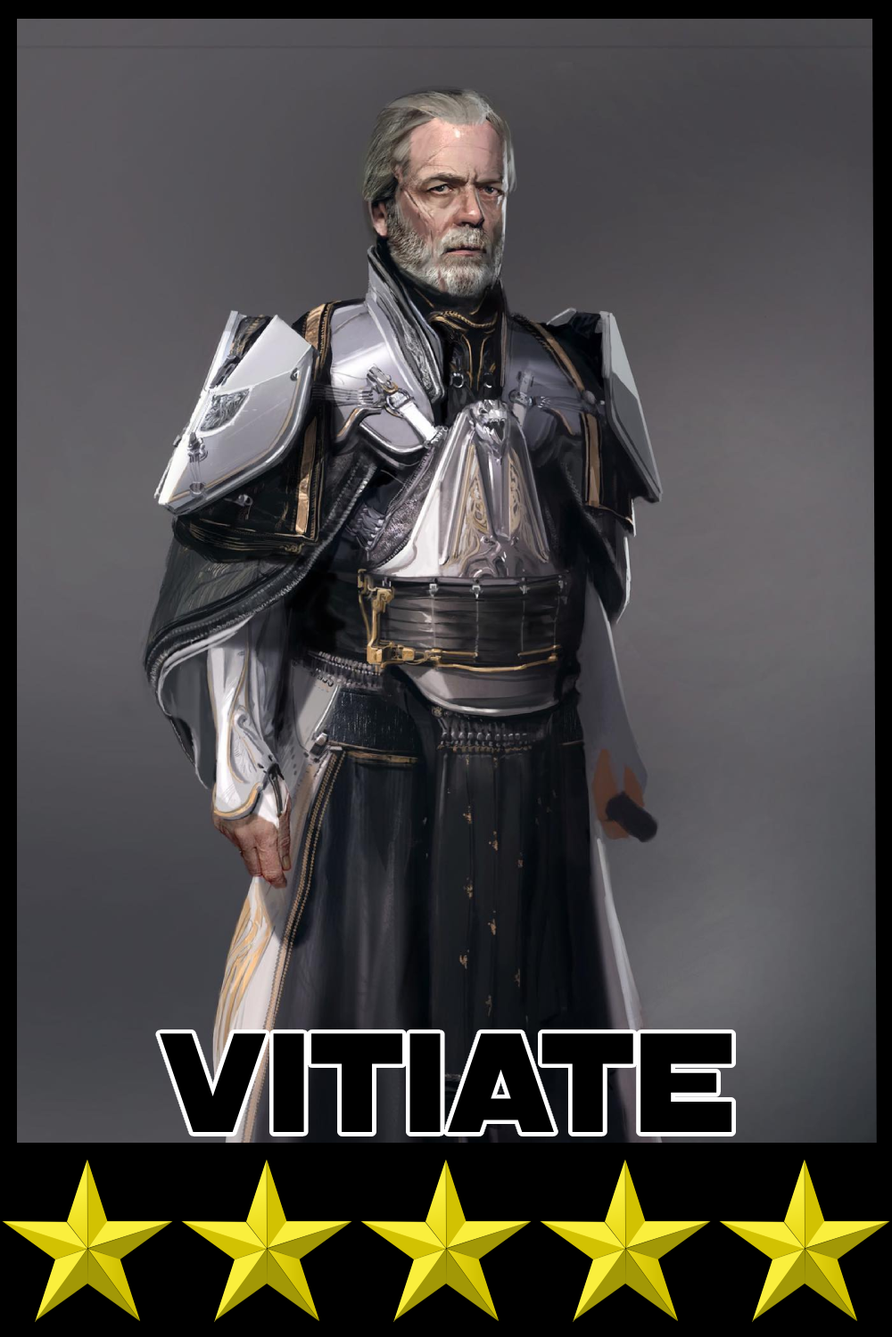
<style>
.page{position:relative;width:892px;height:1337px}
.page>*{position:absolute;margin:0}
.t1{font:151.5px "DistantGalaxy";color:#000000}
</style>
<div class="page">
<p class="t1" style="left:160px;top:1033px;width:572px;height:99px">vitiate</p>
</div>
